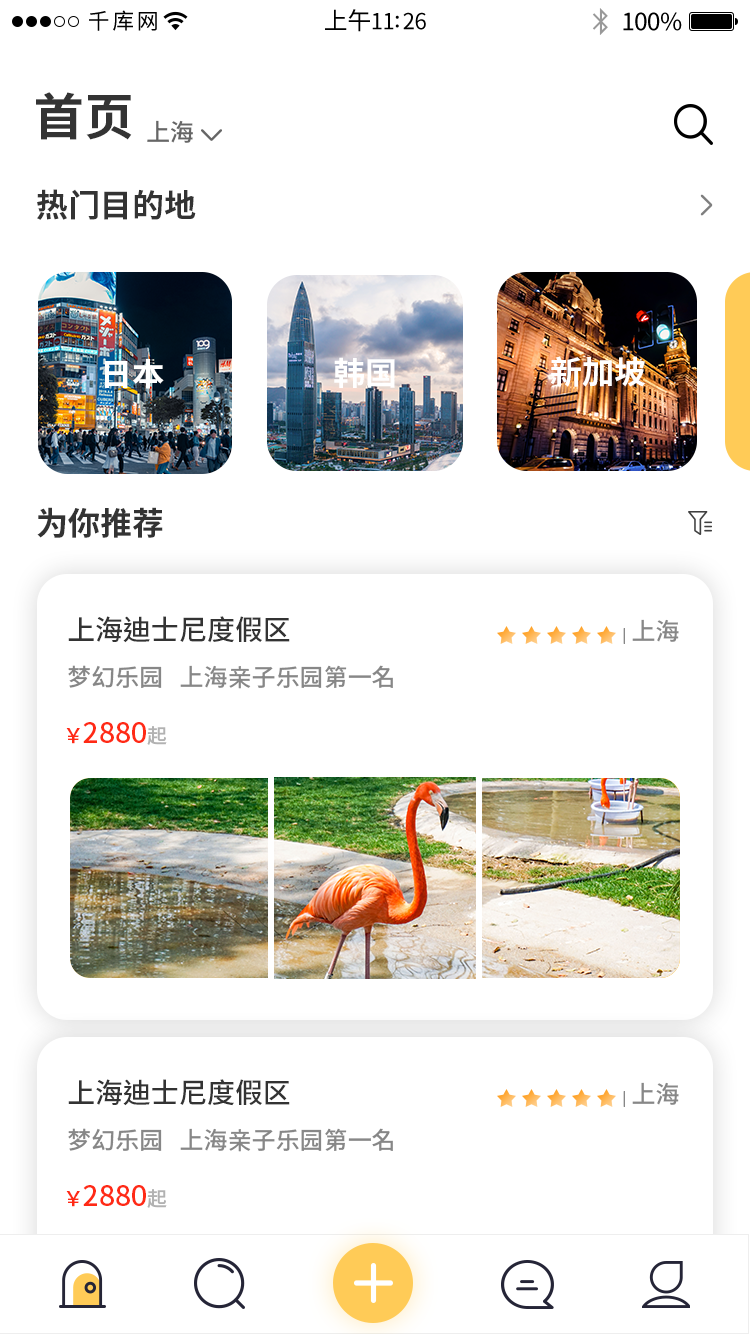
<style>
.page{position:relative;width:750px;height:1334px;background:#ffffff}
.page>*{position:absolute;margin:0}
.t1{font:50px "SourceHanSansSC-Bold";color:#333333}
.t2{font:24px "SourceHanSansSC-Medium";color:#666666}
.t3{font:32px "SourceHanSansSC-Bold";color:#333333}
.t4{font:32px "SourceHanSansSC-Bold";color:#ffffff}
.t5{font:28px "SourceHanSansSC-Medium";color:#333333}
.t6{font:24px "SourceHanSansSC-Medium";color:#878787}
.t7{font:14px "SourceHanSansSC-Medium";color:#878787}
.t8{font:28px "SourceHanSansSC-Medium";color:#ff2a15}
.t9{font:20px "SourceHanSansSC-Medium";color:#ff2a15}
.t10{font:20px "SourceHanSansSC-Medium";color:#b2b2b2}
</style>
<div class="page">
<p class="t1" style="left:36px;top:92px;width:96px;height:48px">首页</p>
<p class="t2" style="left:147px;top:120px;width:46px;height:23px">上海</p>
<p class="t3" style="left:37px;top:189px;width:159px;height:31px">热门目的地</p>
<p class="t4" style="left:105px;top:359px;width:59px;height:30px">日本</p>
<p class="t4" style="left:334px;top:357px;width:61px;height:31px">韩国</p>
<p class="t4" style="left:550px;top:356px;width:96px;height:31px">新加坡</p>
<p class="t3" style="left:37px;top:507px;width:126px;height:31px">为你推荐</p>
<p class="t5" style="left:68px;top:616px;width:222px;height:27px">上海迪士尼度假区</p>
<p class="t6" style="left:623px;top:619px;width:56px;height:25px"><span class="t7">|</span> 上海</p>
<p class="t6" style="left:68px;top:665px;width:325px;height:24px">梦幻乐园   上海亲子乐园第一名</p>
<p class="t8" style="left:66px;top:722px;width:101px;height:23px"><span class="t9">￥</span>2880<span class="t10">起</span></p>
<p class="t5" style="left:68px;top:1079px;width:222px;height:27px">上海迪士尼度假区</p>
<p class="t6" style="left:623px;top:1082px;width:56px;height:25px"><span class="t7">|</span> 上海</p>
<p class="t6" style="left:68px;top:1128px;width:325px;height:24px">梦幻乐园   上海亲子乐园第一名</p>
<p class="t8" style="left:66px;top:1185px;width:101px;height:23px"><span class="t9">￥</span>2880<span class="t10">起</span></p>
</div>
